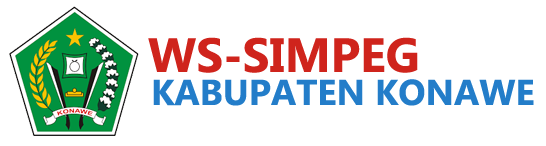
<style>
.page{position:relative;width:546px;height:146px;background:#ffffff}
.page>*{position:absolute;margin:0}
.t1{font:48px "Gadugi-Bold";color:#cf241c}
.t2{font:36px "Gadugi-Bold";color:#237dc9}
</style>
<div class="page">
<p class="t1" style="left:148px;top:37px;width:270px;height:36px">WS-SIMPEG</p>
<p class="t2" style="left:153px;top:79px;width:381px;height:27px">KABUPATEN KONAWE</p>
</div>
